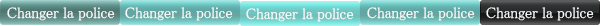
<style>
.page{position:relative;width:600px;height:26px}
.page>*{position:absolute;margin:0}
.t1{font:15px "MS-PMincho";color:#ffffff}
</style>
<div class="page">
<p class="t1" style="left:7px;top:7px;width:108px;height:14px">Changer la police</p>
<p class="t1" style="left:125px;top:7px;width:108px;height:14px">Changer la police</p>
<p class="t1" style="left:246px;top:8px;width:108px;height:14px">Changer la police</p>
<p class="t1" style="left:367px;top:7px;width:108px;height:14px">Changer la police</p>
<p class="t1" style="left:486px;top:7px;width:108px;height:14px">Changer la police</p>
</div>
